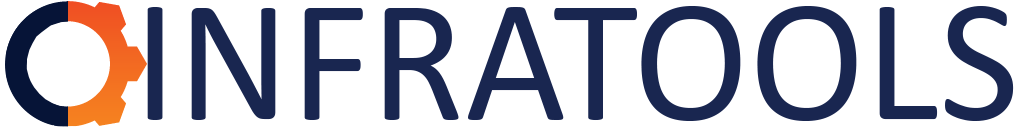
<style>
.page{position:relative;width:1020px;height:127px;background:#ffffff}
.page>*{position:absolute;margin:0}
.t1{font:175px "Calibri";color:#192650}
</style>
<div class="page">
<p class="t1" style="left:147px;top:6px;width:867px;height:115px">INFRATOOLS</p>
</div>
